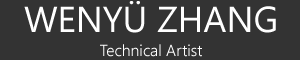
<style>
.page{position:relative;width:300px;height:60px;background:#333333}
.page>*{position:absolute;margin:0}
.t1{font:16px/24px "SegoeUI-Semilight";color:#ffffff}
.t2{font:36px/34px "SegoeUI";color:#ffffff}
</style>
<div class="page">
<p class="t1" style="left:24px;top:1px;width:252px;height:56px;text-align:center"><span class="t2">WENYÜ ZHANG<br></span>Technical Artist</p>
</div>
